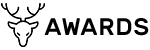
<style>
.page{position:relative;width:150px;height:50px;background:#ffffff}
.page>*{position:absolute;margin:0}
.t1{font:24px "Rubik-Medium";letter-spacing:0.04em;color:#000000}
</style>
<div class="page">
<p class="t1" style="left:44px;top:18px;width:105px;height:18px">AWARDS</p>
</div>
